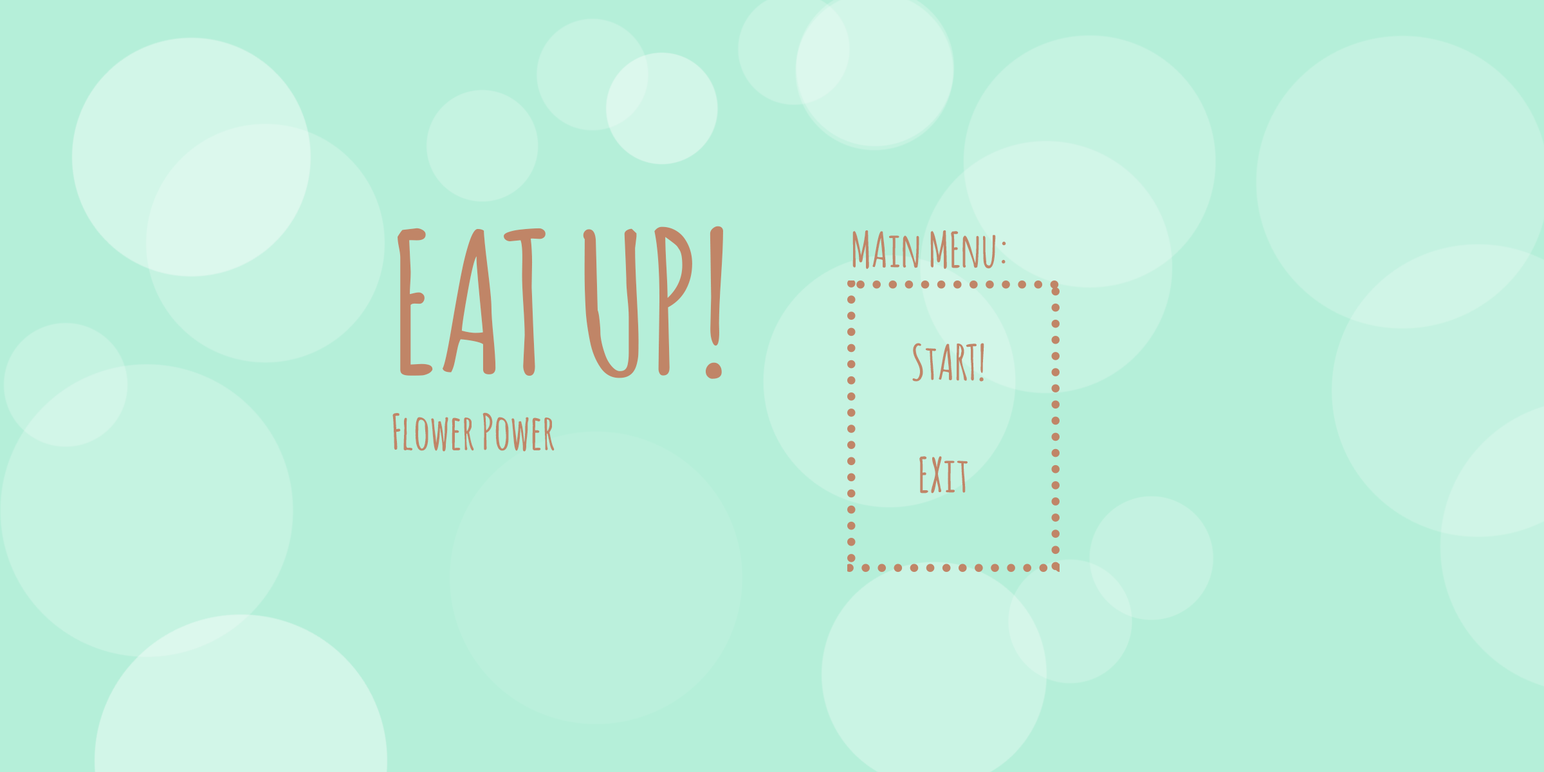
<style>
.page{position:relative;width:1544px;height:772px;background:#b5efd9}
.page>*{position:absolute;margin:0}
.t1{font:48.3px/37.5px "Amatic-Bold";letter-spacing:0.025em;color:#c08567}
.t2{font:193px/37.5px "Amatic-Bold";letter-spacing:0.025em;color:#c08567}
</style>
<div class="page">
<p class="t1" style="left:393px;top:226px;width:330px;height:226px"><span class="t2">EAT UP! <br><br></span>Flower Power</p>
<p class="t1" style="left:853px;top:230px;width:153px;height:264px">MAin MEnu:<br><br><br>         StART! <br><br>       <br>          EXit</p>
</div>
